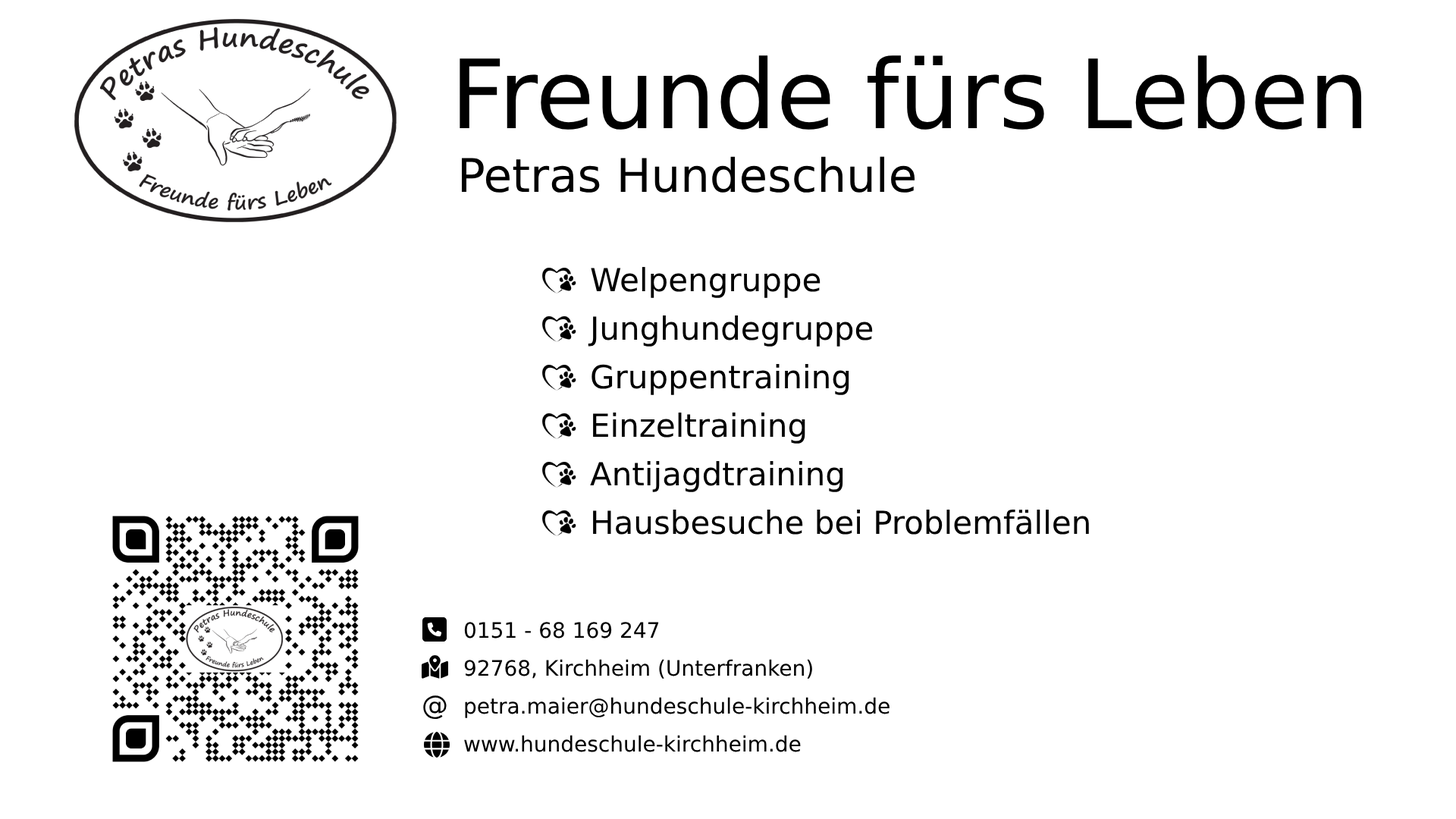
<style>
.page{position:relative;width:1456px;height:819px;background:#ffffff}
.page>*{position:absolute;margin:0}
.t1{font:95.5px "DejaVuSans";color:#000000}
.t2{font:46.3px "DejaVuSans";color:#000000}
.t3{font:31.8px "DejaVuSans";color:#000000}
.t4{font:21.2px "DejaVuSans";color:#000000}
.t5{font:26.5px "DejaVuSans";color:#000000}
</style>
<div class="page">
<p class="t1" style="left:460px;top:55px;width:901px;height:75px">Freunde fürs Leben</p>
<p class="t2" style="left:461px;top:156px;width:454px;height:37px">Petras Hundeschule</p>
<p class="t3" style="left:591px;top:267px;width:230px;height:31px">Welpengruppe</p>
<p class="t3" style="left:588px;top:315px;width:285px;height:32px">Junghundegruppe</p>
<p class="t3" style="left:591px;top:364px;width:258px;height:31px">Gruppentraining</p>
<p class="t3" style="left:593px;top:413px;width:212px;height:31px">Einzeltraining</p>
<p class="t3" style="left:590px;top:461px;width:253px;height:31px">Antijagdtraining</p>
<p class="t3" style="left:593px;top:510px;width:496px;height:25px">Hausbesuche bei Problemfällen</p>
<p class="t4" style="left:464px;top:622px;width:195px;height:17px">0151 - 68 169 247</p>
<p class="t4" style="left:464px;top:659px;width:348px;height:20px">92768, Kirchheim (Unterfranken)</p>
<p class="t5" style="left:423px;top:695px;width:24px;height:25px">@</p>
<p class="t4" style="left:465px;top:697px;width:425px;height:21px">petra.maier@hundeschule-kirchheim.de</p>
<p class="t4" style="left:464px;top:735px;width:337px;height:17px">www.hundeschule-kirchheim.de</p>
</div>
